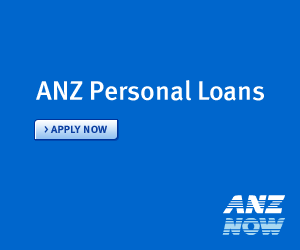
<style>
.page{position:relative;width:300px;height:250px;background:#0066cc}
.page>*{position:absolute;margin:0}
.t1{font:27.2px "MetaMediumLF-Roman";color:#ffffff}
.t2{font:11px "MetaBoldLF-Roman";letter-spacing:0.035em;color:#0a3da0}
.t3{font:12px "MetaMedium-Roman";color:#0a3da0}
</style>
<div class="page">
<p class="t1" style="left:36px;top:80px;width:228px;height:21px">ANZ Personal Loans</p>
<p class="t2" style="left:44px;top:125px;width:63px;height:8px"><span class="t3">&gt; </span>APPLY NOW</p>
</div>
